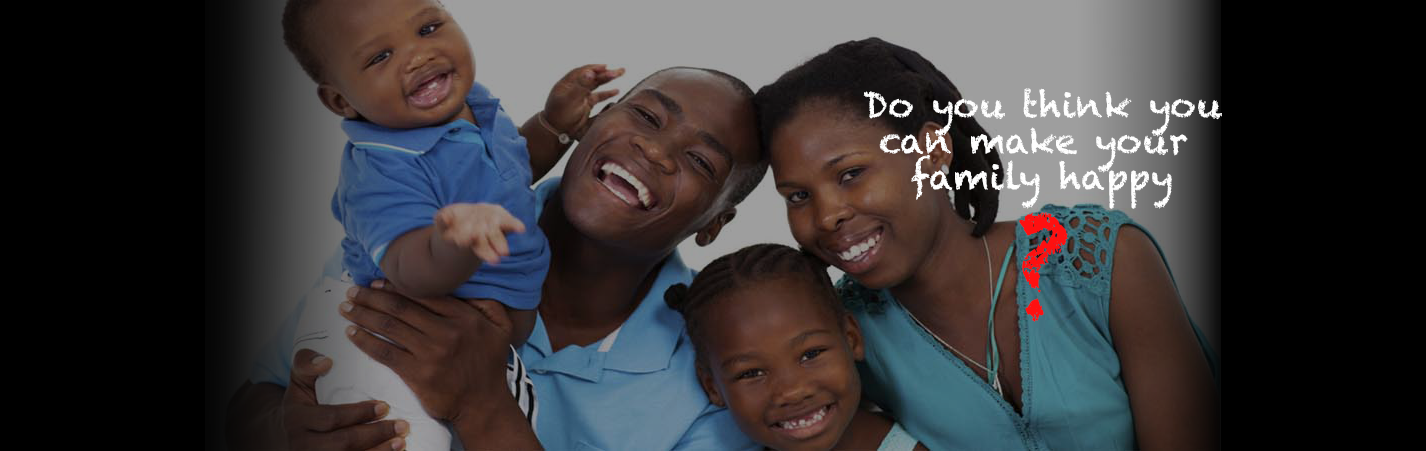
<style>
.page{position:relative;width:1426px;height:451px;background:#000000}
.page>*{position:absolute;margin:0}
.t1{font:36px/36px "Chalkduster";color:#fefefe}
.t2{font:120px/117px "Chalkduster";color:#fe1010}
</style>
<div class="page">
<p class="t1" style="left:863px;top:88px;width:359px;height:234px;text-align:center">Do you think you<br>can make your <br>family happy<br><span class="t2">?</span></p>
</div>
